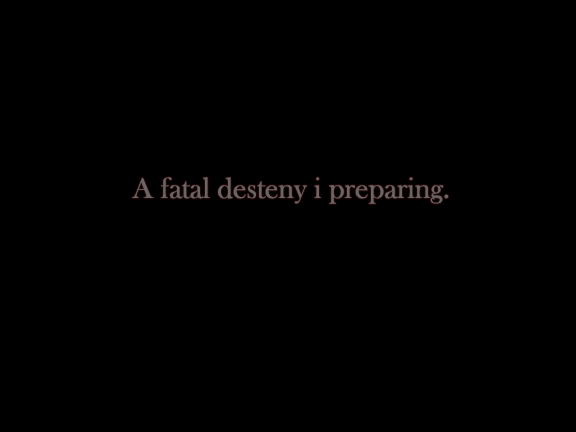
<style>
.page{position:relative;width:576px;height:432px;background:#000000}
.page>*{position:absolute;margin:0}
.t1{font:30px "BaskOldFace";color:#686666}
</style>
<div class="page">
<p class="t1" style="left:132px;top:177px;width:317px;height:27px">A fatal desteny i preparing.</p>
</div>
